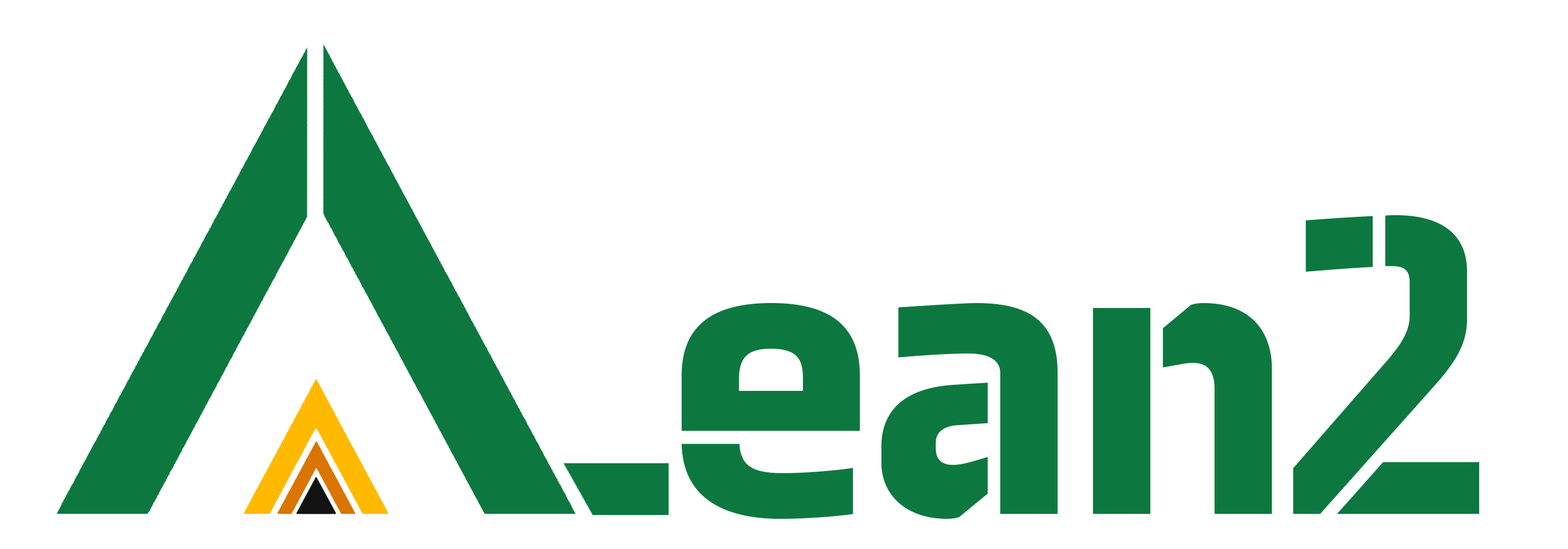
<style>
.page{position:relative;width:1568px;height:549px;background:#ffffff}
.page>*{position:absolute;margin:0}
.t1{font:434.5px "AxiaStencilBlack-Regular";letter-spacing:-0.02em;color:#0c783f}
</style>
<div class="page">
<p class="t1" style="left:682px;top:215px;width:798px;height:304px">ean2</p>
</div>
